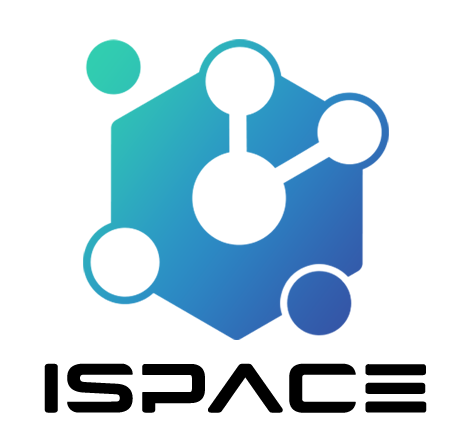
<style>
.page{position:relative;width:472px;height:448px;background:#ffffff}
.page>*{position:absolute;margin:0}
.t1{font:68.9px "rigelstar-Regular";color:#000000;font-weight:bold;scale:1.09 1}
</style>
<div class="page">
<p class="t1" style="left:44px;top:363px;width:383px;height:50px">ispace</p>
</div>
